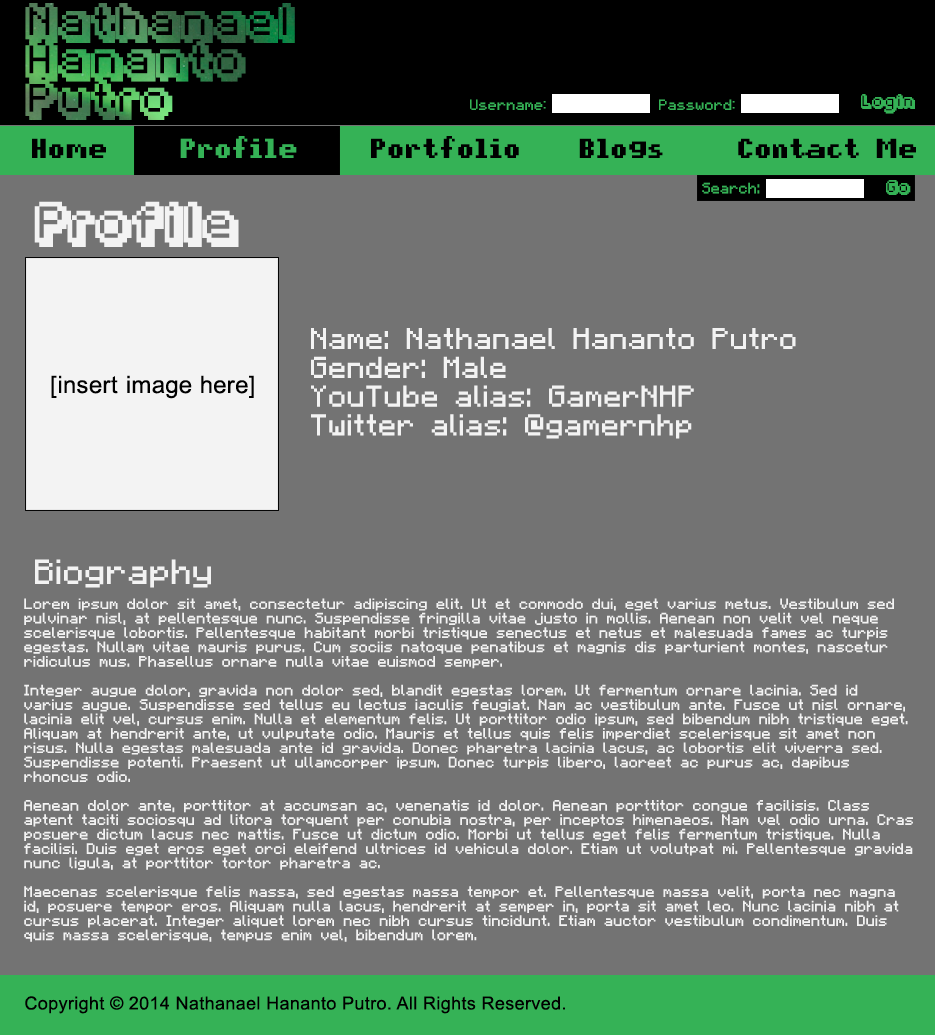
<style>
.page{position:relative;width:935px;height:1035px;background:#737373}
.page>*{position:absolute;margin:0}
.t1{font:32px "Fipps-Regular";letter-spacing:0.02em}
.t2{font:12px "pixelmix";letter-spacing:0.02em;color:#35b256}
.t3{font:12px "Fipps-Regular";letter-spacing:0.02em;color:#35b256}
.t4{font:22px "pixelmix-bold";letter-spacing:0.02em;color:#000000}
.t5{font:22px "pixelmix-bold";letter-spacing:0.02em;color:#35b256}
.t6{font:12px "Minecraftia";letter-spacing:0.02em;color:#35b256}
.t7{font:36px "Fipps-Regular";letter-spacing:0.02em;color:#f3f3f3}
.t8{font:24px "Minecraftia";letter-spacing:0.02em;color:#f3f3f3}
.t9{font:24px "ArialMT";letter-spacing:0.02em;color:#000000}
.t10{font:28px "Minecraftia";letter-spacing:0.02em;color:#f3f3f3}
.t11{font:12px "Minecraftia";letter-spacing:0.02em;color:#f3f3f3}
.t12{font:18px "ArialMT";letter-spacing:0.02em;color:#000000}
</style>
<div class="page">
<p class="t1" style="left:25px;top:3px;width:270px;height:117px">Nathanael<br>Hananto<br>Putro</p>
<p class="t2" style="left:470px;top:99px;width:76px;height:11px">Username:</p>
<p class="t2" style="left:659px;top:99px;width:76px;height:11px">Password:</p>
<p class="t3" style="left:861px;top:94px;width:54px;height:20px">Login</p>
<p class="t4" style="left:32px;top:136px;width:884px;height:22px">Home     <span class="t5">Profile</span>     Portfolio    Blogs     Contact Me</p>
<p class="t6" style="left:702px;top:182px;width:58px;height:12px">Search:</p>
<p class="t3" style="left:886px;top:180px;width:25px;height:15px">Go</p>
<p class="t7" style="left:34px;top:201px;width:205px;height:46px">Profile</p>
<p class="t8" style="left:311px;top:328px;width:485px;height:111px">Name: Nathanael Hananto Putro<br>Gender: Male<br>YouTube alias: GamerNHP<br>Twitter alias: @gamernhp</p>
<p class="t9" style="left:51px;top:375px;width:203px;height:24px">[insert image here]</p>
<p class="t10" style="left:35px;top:559px;width:176px;height:29px">Biography</p>
<p class="t11" style="left:24px;top:598px;width:889px;height:344px">Lorem ipsum dolor sit amet, consectetur adipiscing elit. Ut et commodo dui, eget varius metus. Vestibulum sed pulvinar nisl, at pellentesque nunc. Suspendisse fringilla vitae justo in mollis. Aenean non velit vel neque scelerisque lobortis. Pellentesque habitant morbi tristique senectus et netus et malesuada fames ac turpis egestas. Nullam vitae mauris purus. Cum sociis natoque penatibus et magnis dis parturient montes, nascetur ridiculus mus. Phasellus ornare nulla vitae euismod semper.<br><br>Integer augue dolor, gravida non dolor sed, blandit egestas lorem. Ut fermentum ornare lacinia. Sed id varius augue. Suspendisse sed tellus eu lectus iaculis feugiat. Nam ac vestibulum ante. Fusce ut nisl ornare, lacinia elit vel, cursus enim. Nulla et elementum felis. Ut porttitor odio ipsum, sed bibendum nibh tristique eget. Aliquam at hendrerit ante, ut vulputate odio. Mauris et tellus quis felis imperdiet scelerisque sit amet non risus. Nulla egestas malesuada ante id gravida. Donec pharetra lacinia lacus, ac lobortis elit viverra sed. Suspendisse potenti. Praesent ut ullamcorper ipsum. Donec turpis libero, laoreet ac purus ac, dapibus rhoncus odio.<br><br>Aenean dolor ante, porttitor at accumsan ac, venenatis id dolor. Aenean porttitor congue facilisis. Class aptent taciti sociosqu ad litora torquent per conubia nostra, per inceptos himenaeos. Nam vel odio urna. Cras posuere dictum lacus nec mattis. Fusce ut dictum odio. Morbi ut tellus eget felis fermentum tristique. Nulla facilisi. Duis eget eros eget orci eleifend ultrices id vehicula dolor. Etiam ut volutpat mi. Pellentesque gravida nunc ligula, at porttitor tortor pharetra ac.<br><br>Maecenas scelerisque felis massa, sed egestas massa tempor et. Pellentesque massa velit, porta nec magna id, posuere tempor eros. Aliquam nulla lacus, hendrerit at semper in, porta sit amet leo. Nunc lacinia nibh at cursus placerat. Integer aliquet lorem nec nibh cursus tincidunt. Etiam auctor vestibulum condimentum. Duis quis massa scelerisque, tempus enim vel, bibendum lorem.</p>
<p class="t12" style="left:25px;top:996px;width:540px;height:18px">Copyright © 2014 Nathanael Hananto Putro. All Rights Reserved.</p>
</div>
